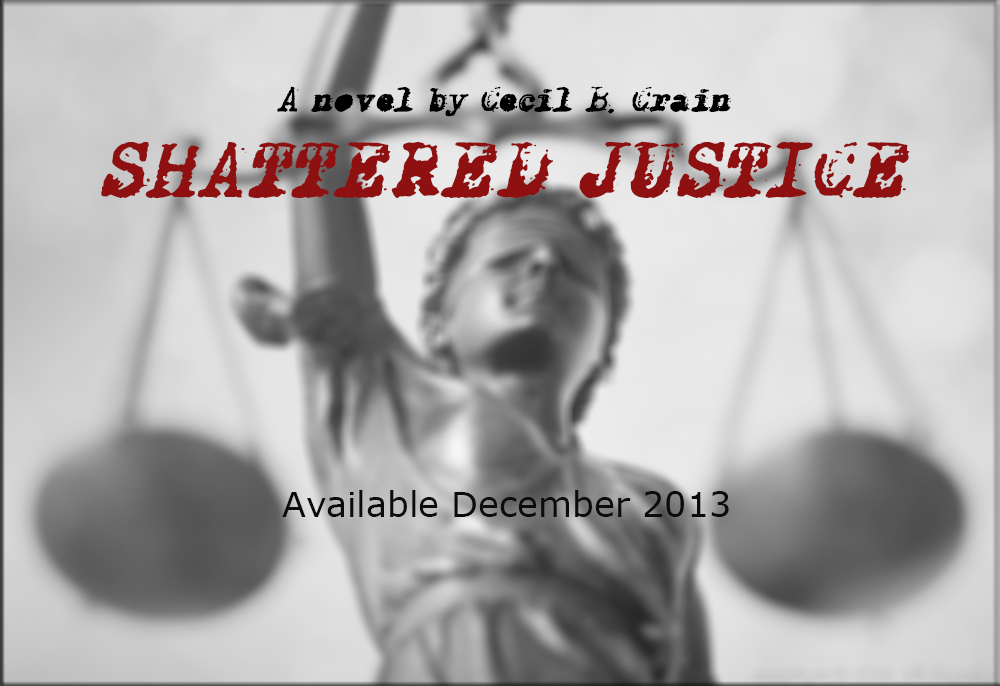
<style>
.page{position:relative;width:1000px;height:686px}
.page>*{position:absolute;margin:0}
.t1{font:36px "X-ClassifiedItalic";color:#000000}
.t2{font:80px "X-ClassifiedItalic";color:#8e1010}
.t3{font:35px "Verdana";color:#0c0c0c}
</style>
<div class="page">
<p class="t1" style="left:277px;top:86px;width:454px;height:31px">A novel by Cecil B. Crain</p>
<p class="t2" style="left:101px;top:141px;width:809px;height:57px">SHATTERED JUSTICE</p>
<p class="t3" style="left:282px;top:490px;width:447px;height:27px">Available December 2013</p>
</div>
